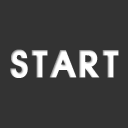
<style>
.page{position:relative;width:128px;height:128px;background:#333333}
.page>*{position:absolute;margin:0}
.t1{font:36px "HYtbrB";color:#ffffff;font-weight:bold}
</style>
<div class="page">
<p class="t1" style="left:10px;top:49px;width:109px;height:29px">START</p>
</div>
